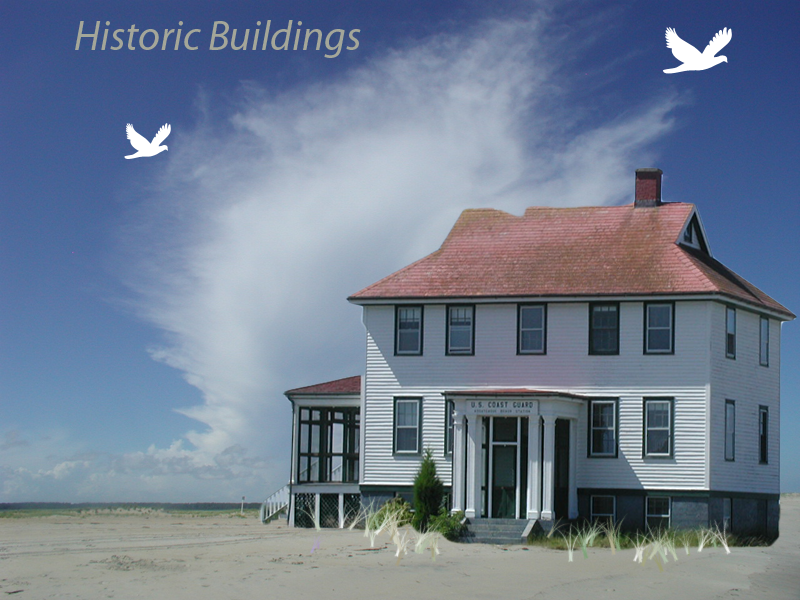
<style>
.page{position:relative;width:800px;height:600px}
.page>*{position:absolute;margin:0}
.t1{font:41.7px "MyriadPro-It";color:#a4a699}
</style>
<div class="page">
<p class="t1" style="left:75px;top:20px;width:286px;height:38px">Historic Buildings</p>
</div>
